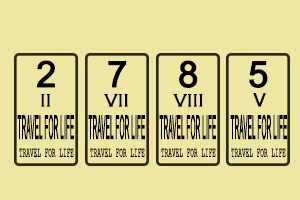
<style>
.page{position:relative;width:300px;height:200px;background:#eee6a2}
.page>*{position:absolute;margin:0}
.t1{font:36px "ArialMT";color:#000000;font-weight:bold}
.t2{font:18px "CopperplateGothic-Light";color:#000000;font-weight:bold}
.t3{font:18px "ArialMT";color:#000000;font-weight:bold}
.t4{font:32.4px "ArialMT";color:#000000;font-weight:bold;scale:0.2 1}
.t5{font:13.6px "CourierNewPSMT";color:#000000;font-weight:bold;scale:0.43 1}
</style>
<div class="page">
<p class="t1" style="left:36px;top:60px;width:19px;height:28px">2</p>
<p class="t1" style="left:108px;top:61px;width:19px;height:27px">7</p>
<p class="t1" style="left:179px;top:60px;width:19px;height:28px">8</p>
<p class="t1" style="left:249px;top:61px;width:19px;height:27px">5</p>
<p class="t2" style="left:41px;top:94px;width:9px;height:13px">II</p>
<p class="t2" style="left:104px;top:94px;width:24px;height:13px">VII</p>
<p class="t2" style="left:173px;top:94px;width:30px;height:13px">VIII</p>
<p class="t3" style="left:253px;top:93px;width:13px;height:14px">V</p>
<p class="t4" style="left:17px;top:114px;width:57px;height:26px">TRAVEL FOR LIFE</p>
<p class="t4" style="left:88px;top:114px;width:57px;height:26px">TRAVEL FOR LIFE</p>
<p class="t4" style="left:159px;top:114px;width:57px;height:26px">TRAVEL FOR LIFE</p>
<p class="t4" style="left:230px;top:114px;width:57px;height:26px">TRAVEL FOR LIFE</p>
<p class="t5" style="left:19px;top:148px;width:55px;height:10px">TRAVEL FOR LIFE</p>
<p class="t5" style="left:90px;top:148px;width:55px;height:10px">TRAVEL FOR LIFE</p>
<p class="t5" style="left:161px;top:148px;width:55px;height:10px">TRAVEL FOR LIFE</p>
<p class="t5" style="left:231px;top:148px;width:55px;height:10px">TRAVEL FOR LIFE</p>
</div>
